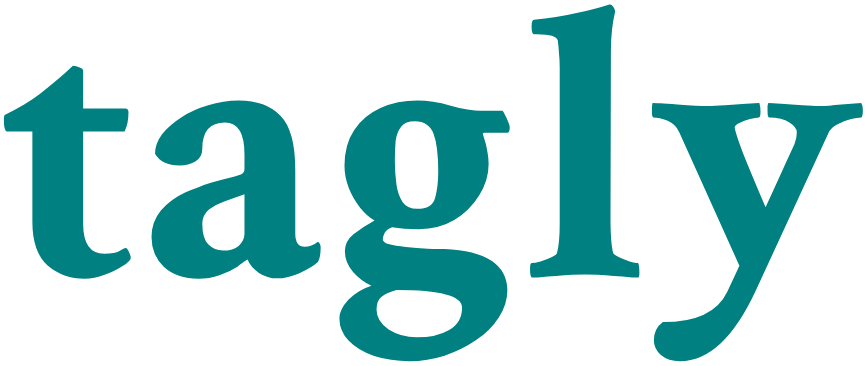
<style>
.page{position:relative;width:867px;height:366px;background:#ffffff}
.page>*{position:absolute;margin:0}
.t1{font:400px "CrimsonText-Bold";color:#008080}
</style>
<div class="page">
<p class="t1" style="left:3px;top:4px;width:860px;height:358px">tagly</p>
</div>
